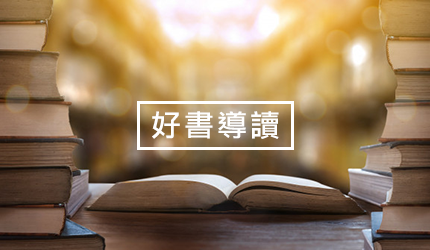
<style>
.page{position:relative;width:430px;height:250px}
.page>*{position:absolute;margin:0}
.t1{font:30px "DFLiHei-W5-WIN-BF";letter-spacing:0.1em;color:#fefefe}
</style>
<div class="page">
<p class="t1" style="left:152px;top:111px;width:127px;height:28px">好書導讀</p>
</div>
